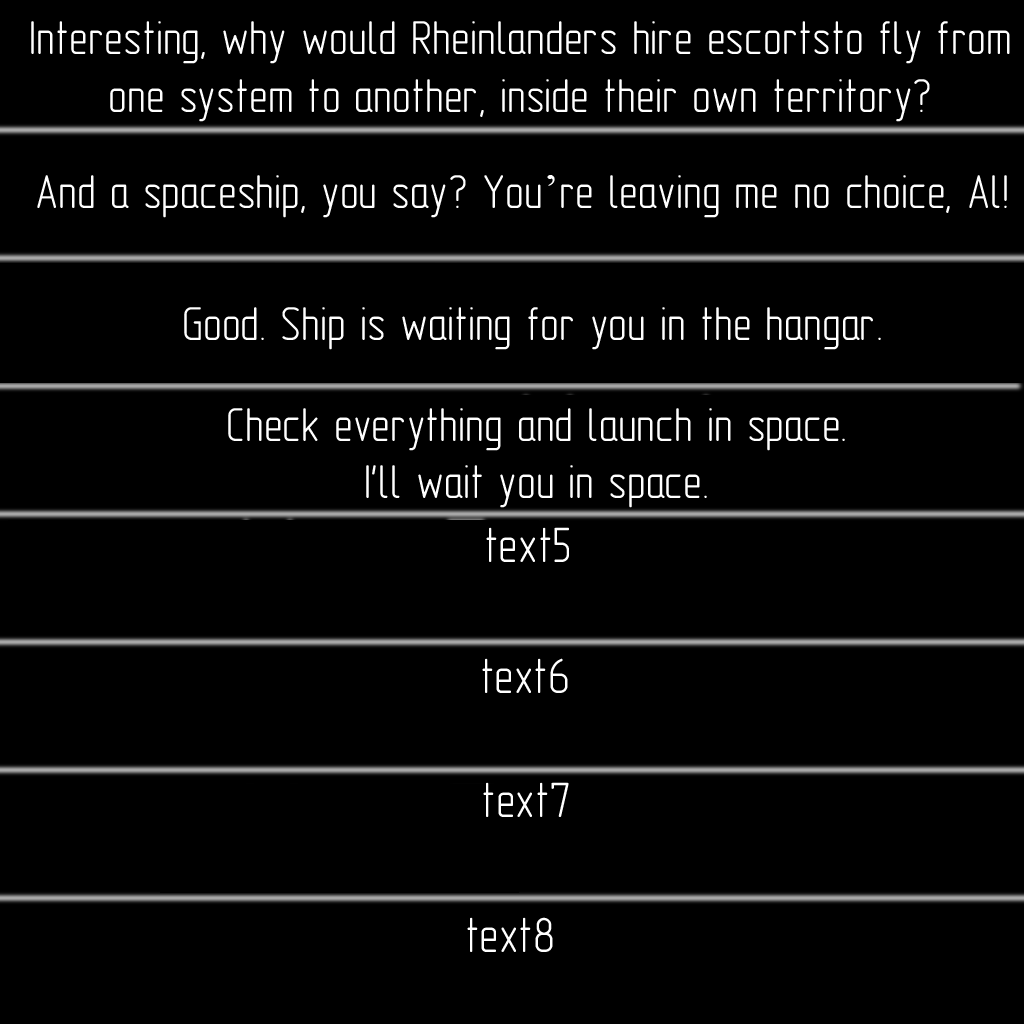
<style>
.page{position:relative;width:1024px;height:1024px;background:#000000}
.page>*{position:absolute;margin:0}
.t1{font:48px "GOST-2.304-81typeA";color:#ffffff}
.t2{font:48px "TimesNewRomanPSMT";color:#ffffff}
.t3{font:50px "GOST-2.304-81typeA";color:#ffffff}
</style>
<div class="page">
<p class="t1" style="left:31px;top:21px;width:979px;height:101px;text-align:center">Interesting, why would Rheinlanders hire escortsto fly from<br>one system to another, inside their own territory?</p>
<p class="t1" style="left:37px;top:175px;width:970px;height:43px">And a spaceship, you say? You<span class="t2">’</span>re leaving me no choice, Al!</p>
<p class="t1" style="left:184px;top:307px;width:697px;height:43px">Good. Ship is waiting for you in the hangar.</p>
<p class="t1" style="left:228px;top:408px;width:617px;height:100px;text-align:center">Check everything and launch in space.<br>I'll wait you in space.</p>
<p class="t3" style="left:486px;top:527px;width:83px;height:35px">text5</p>
<p class="t3" style="left:482px;top:658px;width:86px;height:35px">text6</p>
<p class="t3" style="left:483px;top:782px;width:86px;height:35px">text7</p>
<p class="t3" style="left:467px;top:917px;width:86px;height:35px">text8</p>
</div>
